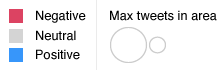
<style>
.page{position:relative;width:224px;height:70px;background:#ffffff}
.page>*{position:absolute;margin:0}
.t1{font:12.9px "Helvetica";color:#000000}
</style>
<div class="page">
<p class="t1" style="left:36px;top:10px;width:50px;height:13px">Negative</p>
<p class="t1" style="left:110px;top:10px;width:107px;height:11px">Max tweets in area</p>
<p class="t1" style="left:36px;top:30px;width:40px;height:11px">Neutral</p>
<p class="t1" style="left:36px;top:49px;width:44px;height:11px">Positive</p>
</div>
